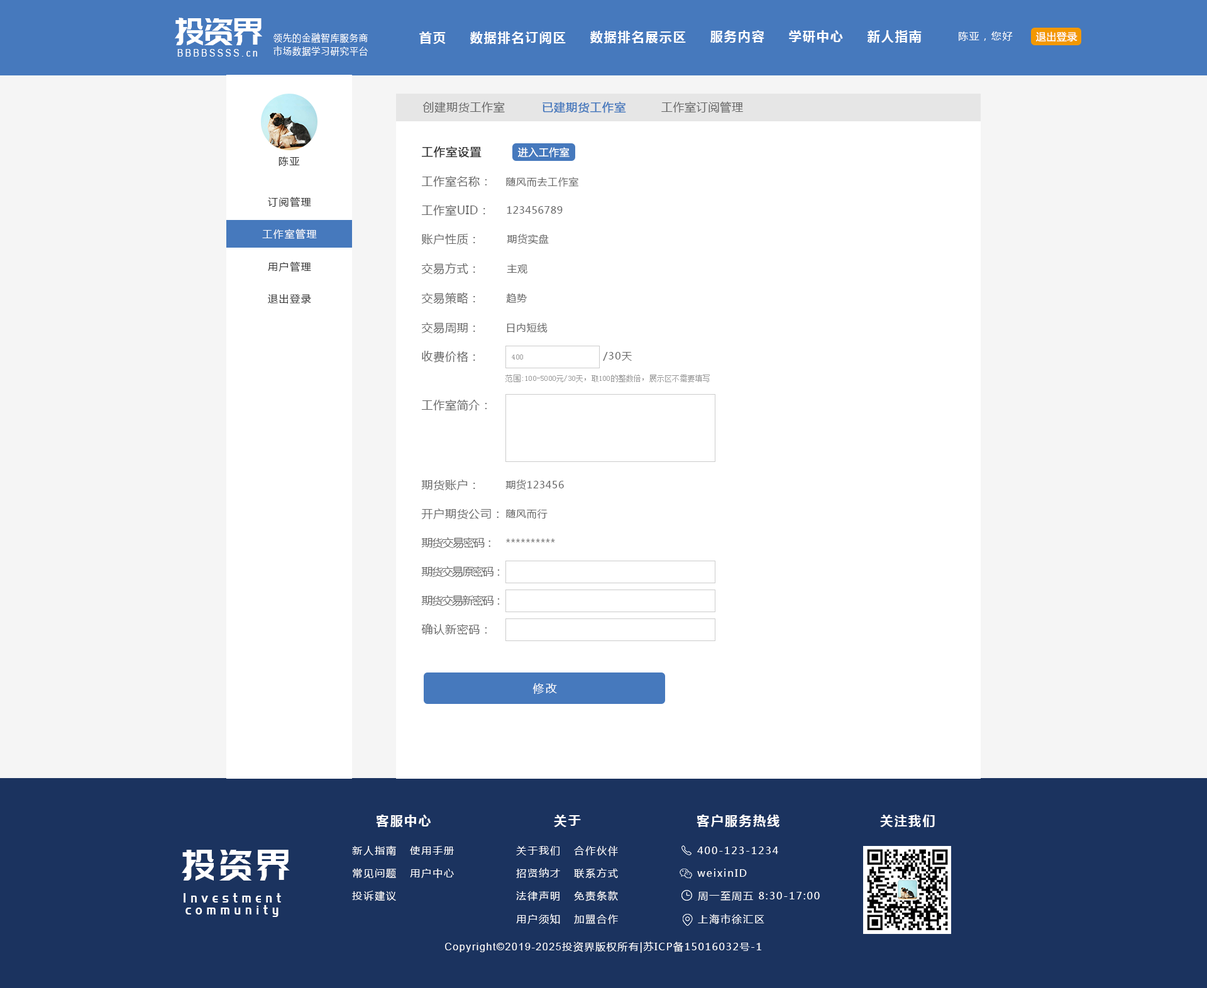
<style>
.page{position:relative;width:1207px;height:988px;background:#ffffff}
.page>*{position:absolute;margin:0}
.t1{font:37.4px "PangMenZhengDao";color:#ffffff;scale:0.86 1}
.t2{font:10.1px "MicrosoftYaHei";letter-spacing:0.1em;color:#ffffff;scale:0.86 1}
.t3{font:12.6px "MicrosoftYaHei-Bold";letter-spacing:0.1em;color:#ffffff}
.t4{font:10.1px "MicrosoftYaHei";letter-spacing:0.1em;color:#ffffff}
.t5{font:10.1px "MicrosoftYaHei";letter-spacing:0.03em;color:#ffffff}
.t6{font:10.1px "ArialMT";letter-spacing:0.26em;color:#ffffff;scale:0.86 1}
.t7{font:11.3px "MicrosoftYaHei";letter-spacing:0.04em;color:#666666}
.t8{font:11.3px "MicrosoftYaHei";letter-spacing:0.04em;color:#4679bd;font-weight:bold}
.t9{font:11.3px "MicrosoftYaHei";letter-spacing:0.04em;color:#333333;font-weight:bold}
.t10{font:10.1px "MicrosoftYaHei";letter-spacing:0.1em;color:#333333}
.t11{font:10.1px "MicrosoftYaHei";letter-spacing:0.04em;color:#666666}
.t12{font:10.1px "MicrosoftYaHei";letter-spacing:0.08em;color:#666666}
.t13{font:7.5px "SimSun";letter-spacing:0.02em;color:#999999}
.t14{font:11.3px "MicrosoftYaHei";letter-spacing:-0.08em;color:#666666}
.t15{font:11.3px "MicrosoftYaHei";letter-spacing:-0.1em;color:#666666}
.t16{font:11.3px "MicrosoftYaHei";letter-spacing:0.12em;color:#ffffff}
.t17{font:12.6px "MicrosoftYaHei-Bold";letter-spacing:0.12em;color:#ffffff}
.t18{font:10.1px "MicrosoftYaHei";letter-spacing:0.12em;color:#ffffff}
.t19{font:42.7px "PangMenZhengDao";letter-spacing:0.1em;color:#ffffff;scale:0.86 1}
.t20{font:13.6px/11.9px "PangMenZhengDao";letter-spacing:0.36em;color:#ffffff;scale:0.86 1}
.t21{font:10.1px "ArialMT";letter-spacing:0.1em;color:#ffffff}
</style>
<div class="page">
<p class="t1" style="left:175px;top:18px;width:87px;height:27px">投资界</p>
<p class="t2" style="left:273px;top:33px;width:95px;height:10px">领先的金融智库服务商</p>
<p class="t3" style="left:419px;top:31px;width:27px;height:13px">首页</p>
<p class="t3" style="left:470px;top:31px;width:96px;height:13px">数据排名订阅区</p>
<p class="t3" style="left:590px;top:31px;width:96px;height:12px">数据排名展示区</p>
<p class="t3" style="left:710px;top:30px;width:54px;height:13px">服务内容</p>
<p class="t3" style="left:789px;top:30px;width:54px;height:13px">学研中心</p>
<p class="t3" style="left:867px;top:30px;width:54px;height:13px">新人指南</p>
<p class="t4" style="left:959px;top:31px;width:54px;height:10px">陈亚，您好</p>
<p class="t5" style="left:1036px;top:31px;width:41px;height:10px">退出登录</p>
<p class="t6" style="left:177px;top:49px;width:80px;height:8px">BBBBSSSS.cn</p>
<p class="t2" style="left:273px;top:46px;width:95px;height:10px">市场数据学习研究平台</p>
<p class="t7" style="left:422px;top:101px;width:83px;height:12px">创建期货工作室</p>
<p class="t8" style="left:542px;top:101px;width:84px;height:12px">已建期货工作室</p>
<p class="t7" style="left:661px;top:101px;width:82px;height:12px">工作室订阅管理</p>
<p class="t9" style="left:422px;top:146px;width:59px;height:12px">工作室设置</p>
<p class="t5" style="left:518px;top:147px;width:51px;height:11px">进入工作室</p>
<p class="t10" style="left:278px;top:157px;width:22px;height:9px">陈亚</p>
<p class="t7" style="left:421px;top:175px;width:66px;height:12px">工作室名称：</p>
<p class="t11" style="left:506px;top:177px;width:72px;height:10px">随风而去工作室</p>
<p class="t10" style="left:268px;top:197px;width:43px;height:10px">订阅管理</p>
<p class="t7" style="left:421px;top:204px;width:64px;height:12px">工作室UID：</p>
<p class="t11" style="left:507px;top:206px;width:56px;height:8px">123456789</p>
<p class="t4" style="left:262px;top:229px;width:55px;height:10px">工作室管理</p>
<p class="t7" style="left:421px;top:234px;width:54px;height:11px">账户性质：</p>
<p class="t11" style="left:507px;top:234px;width:42px;height:11px">期货实盘</p>
<p class="t10" style="left:268px;top:261px;width:43px;height:11px">用户管理</p>
<p class="t7" style="left:421px;top:263px;width:54px;height:12px">交易方式：</p>
<p class="t11" style="left:507px;top:264px;width:20px;height:9px">主观</p>
<p class="t10" style="left:268px;top:294px;width:43px;height:10px">退出登录</p>
<p class="t7" style="left:421px;top:292px;width:54px;height:12px">交易策略：</p>
<p class="t11" style="left:506px;top:293px;width:21px;height:10px">趋势</p>
<p class="t7" style="left:421px;top:322px;width:54px;height:12px">交易周期：</p>
<p class="t11" style="left:507px;top:322px;width:40px;height:11px">日内短线</p>
<p class="t7" style="left:422px;top:351px;width:53px;height:12px">收费价格：</p>
<p class="t12" style="left:603px;top:352px;width:29px;height:9px">/30天</p>
<p class="t13" style="left:512px;top:355px;width:11px;height:5px">400</p>
<p class="t13" style="left:505px;top:375px;width:205px;height:7px">范围:100-5000元/30天，取100的整数倍，展示区不需要填写</p>
<p class="t7" style="left:421px;top:399px;width:66px;height:11px">工作室简介：</p>
<p class="t7" style="left:421px;top:480px;width:54px;height:10px">期货账户：</p>
<p class="t11" style="left:505px;top:480px;width:59px;height:10px">期货123456</p>
<p class="t7" style="left:421px;top:508px;width:77px;height:11px">开户期货公司：</p>
<p class="t11" style="left:506px;top:509px;width:41px;height:10px">随风而行</p>
<p class="t14" style="left:421px;top:537px;width:69px;height:12px">期货交易密码：</p>
<p class="t11" style="left:506px;top:539px;width:49px;height:3px">**********</p>
<p class="t15" style="left:421px;top:566px;width:79px;height:12px">期货交易原密码：</p>
<p class="t15" style="left:421px;top:595px;width:79px;height:12px">期货交易新密码：</p>
<p class="t7" style="left:421px;top:624px;width:66px;height:11px">确认新密码：</p>
<p class="t16" style="left:532px;top:683px;width:25px;height:11px">修改</p>
<p class="t17" style="left:376px;top:815px;width:55px;height:12px">客服中心</p>
<p class="t17" style="left:554px;top:815px;width:27px;height:12px">关于</p>
<p class="t17" style="left:696px;top:815px;width:83px;height:12px">客户服务热线</p>
<p class="t17" style="left:880px;top:815px;width:55px;height:12px">关注我们</p>
<p class="t18" style="left:352px;top:845px;width:44px;height:11px">新人指南</p>
<p class="t19" style="left:182px;top:850px;width:108px;height:31px">投资界</p>
<p class="t18" style="left:410px;top:846px;width:44px;height:9px">使用手册</p>
<p class="t18" style="left:516px;top:846px;width:43px;height:9px">关于我们</p>
<p class="t18" style="left:574px;top:846px;width:44px;height:10px">合作伙伴</p>
<p class="t18" style="left:697px;top:847px;width:81px;height:7px">400-123-1234</p>
<p class="t18" style="left:353px;top:868px;width:43px;height:11px">常见问题</p>
<p class="t18" style="left:410px;top:869px;width:44px;height:9px">用户中心</p>
<p class="t18" style="left:516px;top:868px;width:44px;height:10px">招贤纳才</p>
<p class="t18" style="left:574px;top:868px;width:44px;height:11px">联系方式</p>
<p class="t18" style="left:697px;top:869px;width:50px;height:8px">weixinID</p>
<p class="t20" style="left:184px;top:893px;width:97px;height:24px;text-align:center">Investment<br>community</p>
<p class="t18" style="left:352px;top:891px;width:44px;height:10px">投诉建议</p>
<p class="t18" style="left:516px;top:891px;width:43px;height:10px">法律声明</p>
<p class="t18" style="left:574px;top:891px;width:44px;height:10px">免责条款</p>
<p class="t18" style="left:698px;top:891px;width:122px;height:10px">周一至周五 8:30-17:00</p>
<p class="t18" style="left:516px;top:914px;width:44px;height:10px">用户须知</p>
<p class="t18" style="left:574px;top:915px;width:44px;height:9px">加盟合作</p>
<p class="t18" style="left:698px;top:914px;width:66px;height:11px">上海市徐汇区</p>
<p class="t4" style="left:445px;top:942px;width:316px;height:11px"><span class="t21">Copyright©2019-2025</span>投资界版权所有|苏ICP备15016032号-1</p>
</div>
